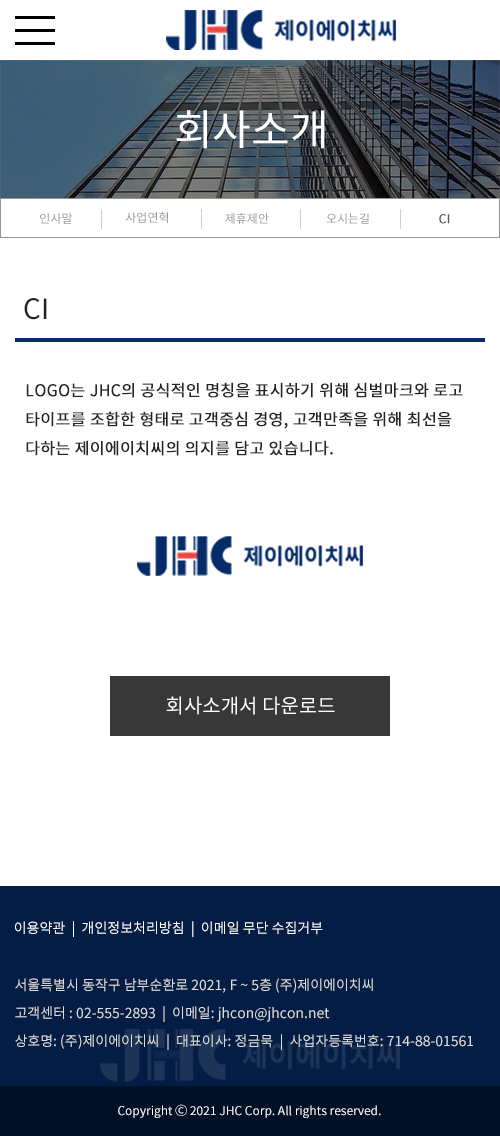
<style>
.page{position:relative;width:500px;height:1136px;background:#ffffff}
.page>*{position:absolute;margin:0}
.t1{font:42px "NotoSansKR-Regular";color:#ffffff}
.t2{font:12px "NotoSansKR-Regular";color:#959595}
.t3{font:12px "NotoSansKR-Regular";color:#595959;font-weight:bold}
.t4{font:28px "NotoSansKR-Regular";color:#242424}
.t5{font:16px/29px "NotoSansKR-Regular";color:#242424;font-weight:bold}
.t6{font:20px "NotoSansKR-Regular";color:#ffffff}
.t7{font:14px "NotoSansKR-Regular";color:#ffffff}
.t8{font:14px/28px "NotoSansKR-Regular";color:#dddddd}
.t9{font:12px "NotoSansKR-Regular";color:#ffffff}
</style>
<div class="page">
<p class="t1" style="left:176px;top:110px;width:149px;height:39px">회사소개</p>
<p class="t2" style="left:40px;top:213px;width:32px;height:11px">인사말</p>
<p class="t2" style="left:125px;top:212px;width:43px;height:11px">사업연혁</p>
<p class="t2" style="left:225px;top:213px;width:44px;height:11px">제휴제안</p>
<p class="t2" style="left:326px;top:213px;width:43px;height:11px">오시는길</p>
<p class="t3" style="left:439px;top:214px;width:11px;height:10px">CI</p>
<p class="t4" style="left:24px;top:298px;width:23px;height:22px">CI</p>
<p class="t5" style="left:26px;top:382px;width:437px;height:74px">LOGO는 JHC의 공식적인 명칭을 표시하기 위해 심벌마크와 로고<br>타이프를 조합한 형태로 고객중심 경영, 고객만족을 위해 최선을<br>다하는 제이에이치씨의 의지를 담고 있습니다.</p>
<p class="t6" style="left:166px;top:696px;width:169px;height:19px">회사소개서 다운로드</p>
<p class="t7" style="left:15px;top:921px;width:308px;height:16px">이용약관  |  개인정보처리방침  |  이메일 무단 수집거부</p>
<p class="t8" style="left:15px;top:978px;width:458px;height:72px">서울특별시 동작구 남부순환로 2021, F ~ 5층 (주)제이에이치씨<br>고객센터 : 02-555-2893  |  이메일: jhcon@jhcon.net<br>상호명: (주)제이에이치씨  |  대표이사: 정금묵  |  사업자등록번호: 714-88-01561</p>
<p class="t9" style="left:118px;top:1104px;width:263px;height:14px">Copyright Ⓒ 2021 JHC Corp. All rights reserved.</p>
</div>
